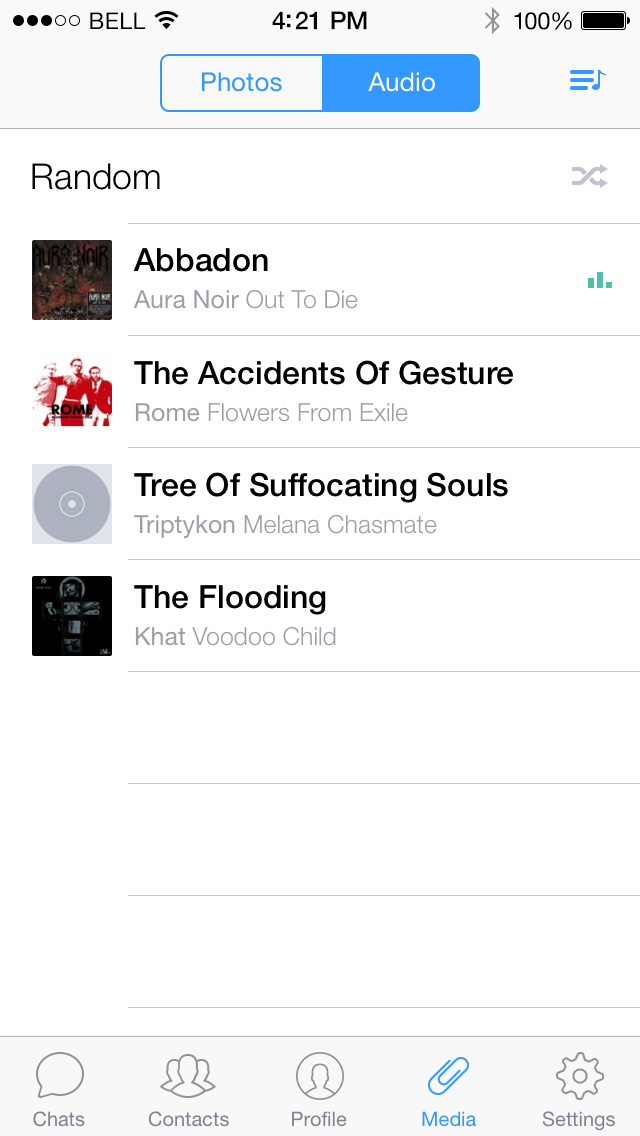
<style>
.page{position:relative;width:640px;height:1136px;background:#ffffff}
.page>*{position:absolute;margin:0}
.t1{font:23px "HelveticaNeue";letter-spacing:0.02em;color:#000000}
.t2{font:25px "HelveticaNeue-Medium";letter-spacing:-0.02em;color:#000000}
.t3{font:24px "HelveticaNeue";letter-spacing:-0.02em;color:#000000}
.t4{font:26px "HelveticaNeue";color:#3399ff}
.t5{font:26px "HelveticaNeue";color:#ffffff}
.t6{font:35.6px "HelveticaNeue-Light";color:#000000}
.t7{font:24.9px/37.3px "HelveticaNeue-Light";color:#9b9fa8}
.t8{font:32px/37.3px "HelveticaNeue-Medium";color:#000000}
.t9{font:24.9px/37.3px "HelveticaNeue";color:#9b9fa8}
.t10{font:20px "HelveticaNeue";color:#7e838f}
.t11{font:20px "HelveticaNeue";color:#3399ff}
</style>
<div class="page">
<p class="t1" style="left:90px;top:12px;width:56px;height:17px">BELL</p>
<p class="t2" style="left:272px;top:11px;width:95px;height:19px">4:21 PM</p>
<p class="t3" style="left:514px;top:12px;width:58px;height:18px">100%</p>
<p class="t4" style="left:202px;top:72px;width:80px;height:20px">Photos</p>
<p class="t5" style="left:368px;top:72px;width:67px;height:20px">Audio</p>
<p class="t6" style="left:32px;top:163px;width:128px;height:27px">Random</p>
<p class="t7" style="left:133px;top:248px;width:225px;height:61px"><span class="t8">Abbadon<br></span><span class="t9">Aura Noir </span>Out To Die</p>
<p class="t8" style="left:134px;top:360px;width:379px;height:62px">The Accidents Of Gesture<br><span class="t9">Rome </span><span class="t7">Flowers From Exile</span></p>
<p class="t8" style="left:134px;top:472px;width:374px;height:67px">Tree Of Suffocating Souls<br><span class="t9">Triptykon </span><span class="t7">Melana Chasmate</span></p>
<p class="t8" style="left:134px;top:585px;width:202px;height:61px">The Flooding<br><span class="t9">Khat </span><span class="t7">Voodoo Child</span></p>
<p class="t10" style="left:33px;top:1111px;width:52px;height:16px">Chats</p>
<p class="t10" style="left:148px;top:1111px;width:81px;height:16px">Contacts</p>
<p class="t10" style="left:292px;top:1111px;width:55px;height:16px">Profile</p>
<p class="t11" style="left:422px;top:1111px;width:54px;height:16px">Media</p>
<p class="t10" style="left:542px;top:1111px;width:73px;height:20px">Settings</p>
</div>
